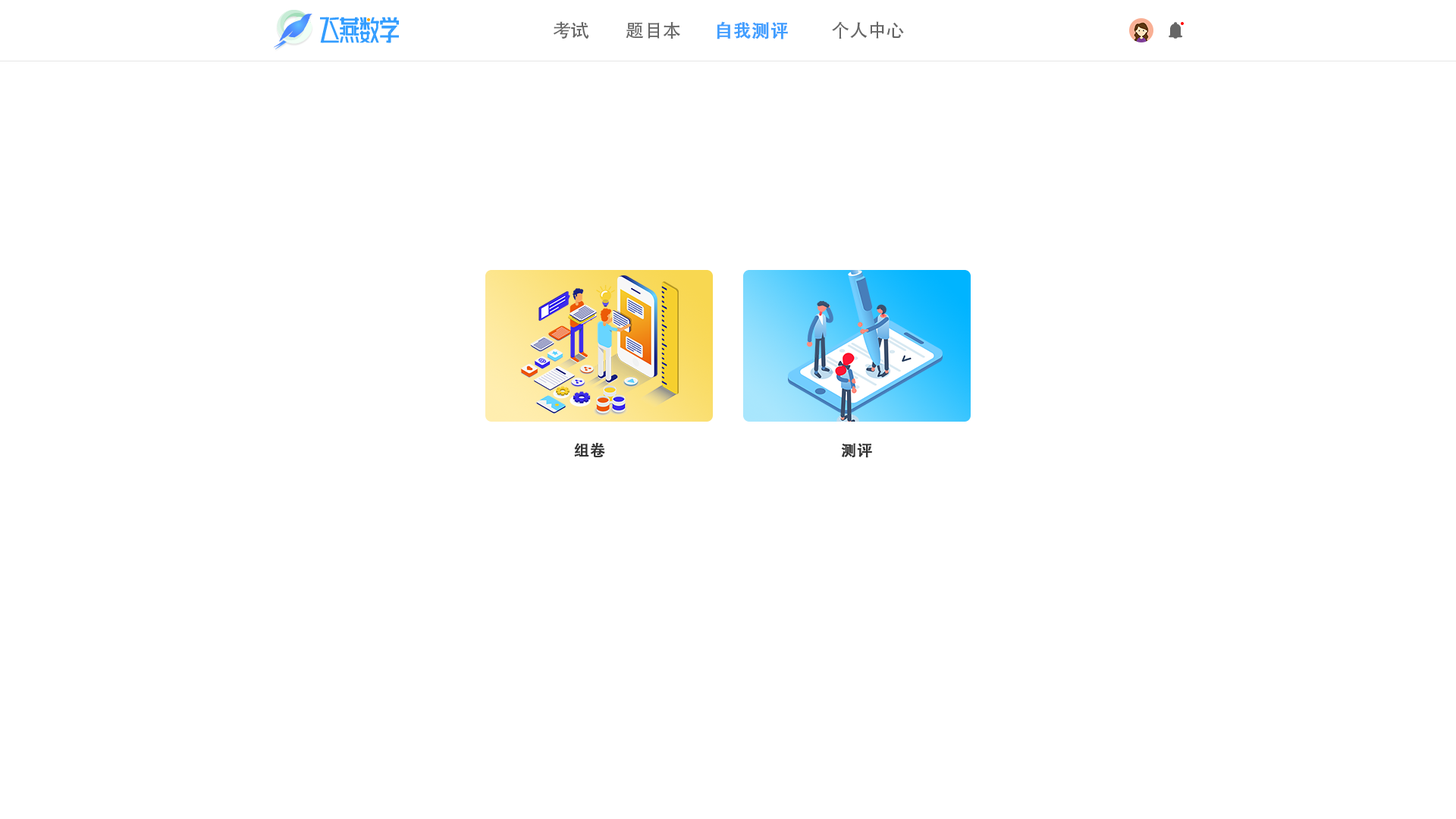
<style>
.page{position:relative;width:1456px;height:819px;background:#ffffff}
.page>*{position:absolute;margin:0}
.t1{font:18.2px "AdobeHeitiStd-Regular";color:#666666}
.t2{font:18.2px "AdobeHeitiStd-Regular";color:#409eff;font-weight:bold}
.t3{font:15.2px "AdobeHeitiStd-Regular";color:#333333;font-weight:bold}
</style>
<div class="page">
<p class="t1" style="left:553px;top:21px;width:36px;height:18px">考试</p>
<p class="t1" style="left:626px;top:22px;width:54px;height:17px">题目本</p>
<p class="t2" style="left:717px;top:21px;width:71px;height:18px">自我测评</p>
<p class="t1" style="left:832px;top:21px;width:72px;height:18px">个人中心</p>
<p class="t3" style="left:574px;top:442px;width:31px;height:15px">组卷</p>
<p class="t3" style="left:841px;top:443px;width:31px;height:15px">测评</p>
</div>
